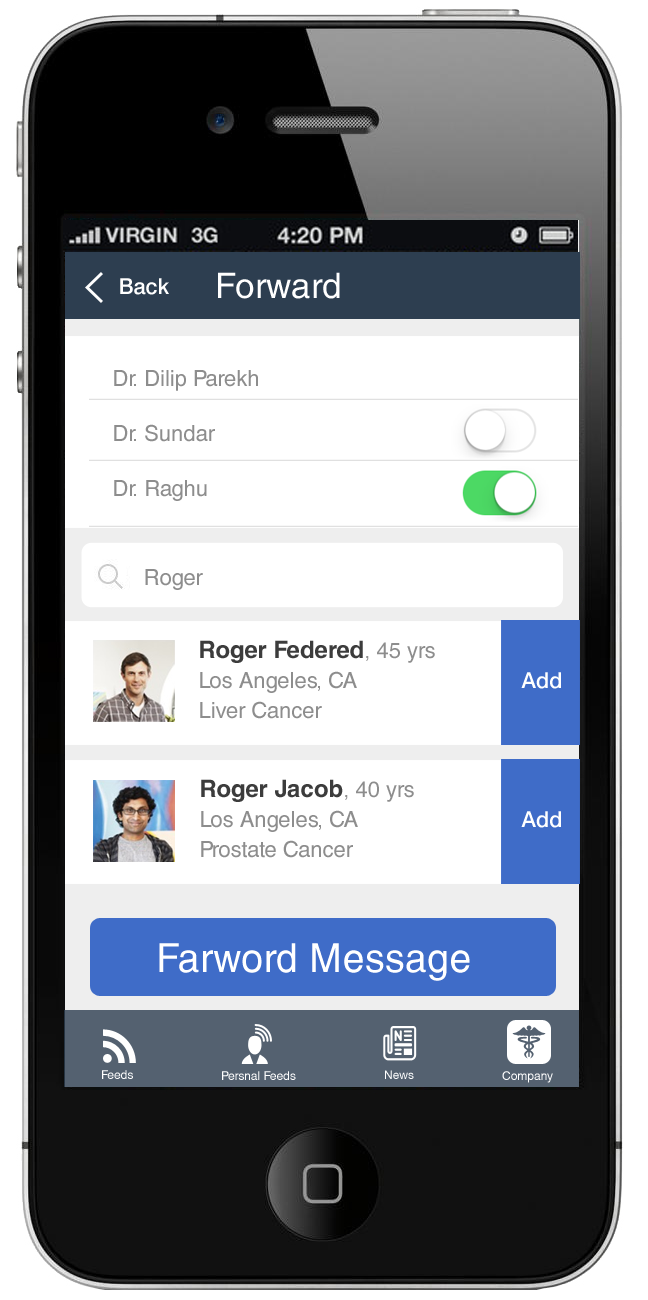
<style>
.page{position:relative;width:648px;height:1300px;background:#ffffff}
.page>*{position:absolute;margin:0}
.t1{font:22px "Swiss721BT-Medium";color:#ffffff}
.t2{font:35px "HelveticaLT";color:#ffffff}
.t3{font:22px/55px "HelveticaCE-Regular";color:#8d8d8d}
.t4{font:22px "HelveticaCE-Regular";color:#8d8d8d}
.t5{font:22px/30px "HelveticaCE-Regular";color:#8d8d8d}
.t6{font:24px/30px "HelveticaCE-Bold";color:#3c3c3c}
.t7{font:40px "HelveticaCyr-Upright";color:#ffffff}
.t8{font:12px "HelveticaCE-Regular";color:#ffffff}
.t9{font:12px "HelveticaNeueCE-Roman";color:#ffffff}
</style>
<div class="page">
<p class="t1" style="left:120px;top:278px;width:49px;height:17px">Back</p>
<p class="t2" style="left:218px;top:272px;width:122px;height:27px">Forward</p>
<p class="t3" style="left:114px;top:370px;width:144px;height:131px">Dr. Dilip Parekh<br>Dr. Sundar<br>Dr. Raghu</p>
<p class="t4" style="left:145px;top:569px;width:58px;height:21px">Roger</p>
<p class="t5" style="left:200px;top:640px;width:235px;height:79px"><span class="t6">Roger Federed</span>, 45 yrs<br>Los Angeles, CA<br>Liver Cancer</p>
<p class="t1" style="left:521px;top:672px;width:40px;height:17px">Add</p>
<p class="t5" style="left:201px;top:779px;width:213px;height:79px"><span class="t6">Roger Jacob</span>, 40 yrs<br>Los Angeles, CA<br>Prostate Cancer</p>
<p class="t1" style="left:521px;top:811px;width:40px;height:17px">Add</p>
<p class="t7" style="left:159px;top:943px;width:311px;height:38px">Farword Message</p>
<p class="t8" style="left:102px;top:1070px;width:31px;height:9px">Feeds</p>
<p class="t8" style="left:222px;top:1071px;width:74px;height:9px">Persnal Feeds</p>
<p class="t9" style="left:385px;top:1070px;width:29px;height:9px">News</p>
<p class="t8" style="left:502px;top:1071px;width:51px;height:12px">Company</p>
</div>
